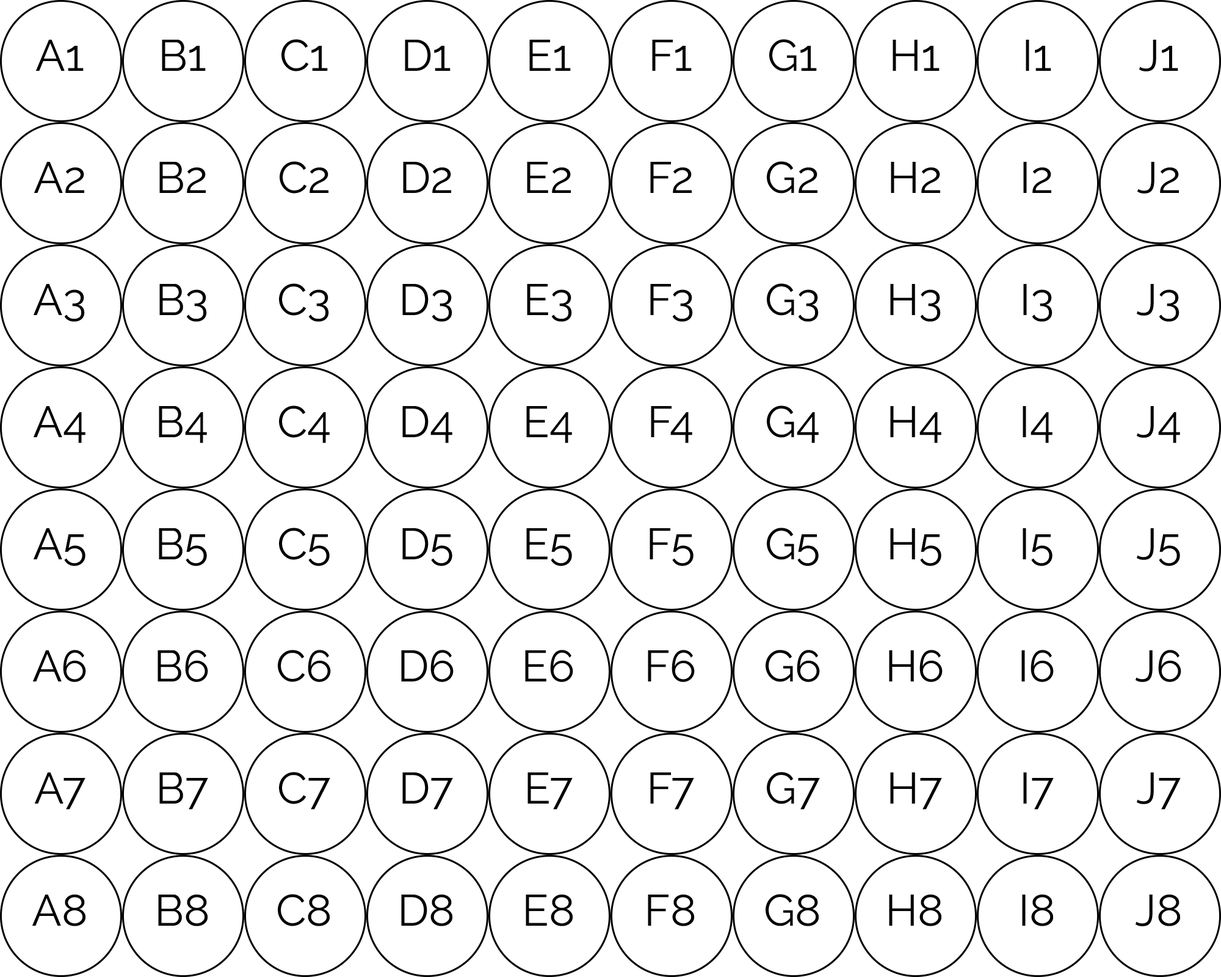
<style>
.page{position:relative;width:1221px;height:977px;background:#ffffff}
.page>*{position:absolute;margin:0}
.t1{font:44px "Raleway-Regular";color:#000000;font-variant:small-caps}
</style>
<div class="page">
<p class="t1" style="left:35px;top:40px;width:49px;height:31px">A1</p>
<p class="t1" style="left:162px;top:40px;width:44px;height:31px">B1</p>
<p class="t1" style="left:281px;top:39px;width:47px;height:32px">C1</p>
<p class="t1" style="left:405px;top:40px;width:46px;height:31px">D1</p>
<p class="t1" style="left:529px;top:40px;width:42px;height:31px">E1</p>
<p class="t1" style="left:652px;top:40px;width:40px;height:31px">F1</p>
<p class="t1" style="left:769px;top:39px;width:48px;height:32px">G1</p>
<p class="t1" style="left:892px;top:40px;width:47px;height:31px">H1</p>
<p class="t1" style="left:1026px;top:40px;width:25px;height:31px">I1</p>
<p class="t1" style="left:1139px;top:40px;width:39px;height:31px">J1</p>
<p class="t1" style="left:34px;top:162px;width:50px;height:31px">A2</p>
<p class="t1" style="left:159px;top:162px;width:47px;height:31px">B2</p>
<p class="t1" style="left:280px;top:161px;width:48px;height:33px">C2</p>
<p class="t1" style="left:403px;top:162px;width:48px;height:31px">D2</p>
<p class="t1" style="left:527px;top:162px;width:44px;height:31px">E2</p>
<p class="t1" style="left:650px;top:162px;width:42px;height:31px">F2</p>
<p class="t1" style="left:767px;top:161px;width:50px;height:33px">G2</p>
<p class="t1" style="left:891px;top:162px;width:49px;height:31px">H2</p>
<p class="t1" style="left:1023px;top:162px;width:28px;height:31px">I2</p>
<p class="t1" style="left:1137px;top:162px;width:42px;height:32px">J2</p>
<p class="t1" style="left:33px;top:284px;width:52px;height:38px">A3</p>
<p class="t1" style="left:159px;top:284px;width:48px;height:38px">B3</p>
<p class="t1" style="left:279px;top:283px;width:50px;height:39px">C3</p>
<p class="t1" style="left:402px;top:284px;width:50px;height:38px">D3</p>
<p class="t1" style="left:527px;top:284px;width:45px;height:38px">E3</p>
<p class="t1" style="left:650px;top:284px;width:43px;height:38px">F3</p>
<p class="t1" style="left:767px;top:283px;width:52px;height:39px">G3</p>
<p class="t1" style="left:890px;top:284px;width:51px;height:38px">H3</p>
<p class="t1" style="left:1023px;top:284px;width:29px;height:38px">I3</p>
<p class="t1" style="left:1137px;top:284px;width:42px;height:38px">J3</p>
<p class="t1" style="left:33px;top:406px;width:52px;height:37px">A4</p>
<p class="t1" style="left:159px;top:406px;width:48px;height:37px">B4</p>
<p class="t1" style="left:279px;top:405px;width:51px;height:38px">C4</p>
<p class="t1" style="left:402px;top:406px;width:50px;height:37px">D4</p>
<p class="t1" style="left:526px;top:406px;width:46px;height:37px">E4</p>
<p class="t1" style="left:651px;top:406px;width:41px;height:37px">F4</p>
<p class="t1" style="left:767px;top:405px;width:52px;height:38px">G4</p>
<p class="t1" style="left:890px;top:406px;width:51px;height:37px">H4</p>
<p class="t1" style="left:1022px;top:406px;width:30px;height:37px">I4</p>
<p class="t1" style="left:1137px;top:406px;width:43px;height:37px">J4</p>
<p class="t1" style="left:33px;top:528px;width:52px;height:38px">A5</p>
<p class="t1" style="left:159px;top:528px;width:48px;height:38px">B5</p>
<p class="t1" style="left:279px;top:527px;width:51px;height:39px">C5</p>
<p class="t1" style="left:402px;top:528px;width:50px;height:38px">D5</p>
<p class="t1" style="left:526px;top:528px;width:46px;height:38px">E5</p>
<p class="t1" style="left:650px;top:528px;width:43px;height:38px">F5</p>
<p class="t1" style="left:767px;top:527px;width:52px;height:39px">G5</p>
<p class="t1" style="left:890px;top:528px;width:51px;height:38px">H5</p>
<p class="t1" style="left:1022px;top:528px;width:30px;height:38px">I5</p>
<p class="t1" style="left:1137px;top:528px;width:43px;height:38px">J5</p>
<p class="t1" style="left:32px;top:650px;width:54px;height:32px">A6</p>
<p class="t1" style="left:157px;top:650px;width:51px;height:32px">B6</p>
<p class="t1" style="left:278px;top:650px;width:53px;height:32px">C6</p>
<p class="t1" style="left:401px;top:650px;width:53px;height:32px">D6</p>
<p class="t1" style="left:525px;top:650px;width:48px;height:32px">E6</p>
<p class="t1" style="left:648px;top:650px;width:47px;height:32px">F6</p>
<p class="t1" style="left:765px;top:650px;width:55px;height:32px">G6</p>
<p class="t1" style="left:889px;top:650px;width:54px;height:32px">H6</p>
<p class="t1" style="left:1021px;top:650px;width:33px;height:32px">I6</p>
<p class="t1" style="left:1135px;top:650px;width:46px;height:32px">J6</p>
<p class="t1" style="left:34px;top:772px;width:51px;height:37px">A7</p>
<p class="t1" style="left:159px;top:772px;width:49px;height:37px">B7</p>
<p class="t1" style="left:279px;top:772px;width:51px;height:37px">C7</p>
<p class="t1" style="left:402px;top:772px;width:51px;height:37px">D7</p>
<p class="t1" style="left:527px;top:772px;width:46px;height:37px">E7</p>
<p class="t1" style="left:650px;top:772px;width:44px;height:37px">F7</p>
<p class="t1" style="left:767px;top:772px;width:53px;height:37px">G7</p>
<p class="t1" style="left:890px;top:772px;width:52px;height:37px">H7</p>
<p class="t1" style="left:1023px;top:772px;width:31px;height:37px">I7</p>
<p class="t1" style="left:1137px;top:772px;width:44px;height:37px">J7</p>
<p class="t1" style="left:278px;top:894px;width:52px;height:32px">C8</p>
<p class="t1" style="left:765px;top:894px;width:54px;height:32px">G8</p>
<p class="t1" style="left:32px;top:894px;width:53px;height:32px">A8</p>
<p class="t1" style="left:158px;top:894px;width:50px;height:32px">B8</p>
<p class="t1" style="left:401px;top:894px;width:51px;height:32px">D8</p>
<p class="t1" style="left:526px;top:894px;width:47px;height:32px">E8</p>
<p class="t1" style="left:648px;top:894px;width:46px;height:32px">F8</p>
<p class="t1" style="left:889px;top:894px;width:52px;height:32px">H8</p>
<p class="t1" style="left:1022px;top:894px;width:31px;height:32px">I8</p>
<p class="t1" style="left:1135px;top:894px;width:45px;height:32px">J8</p>
</div>
